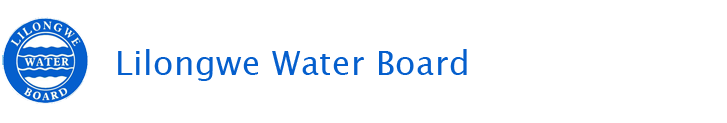
<style>
.page{position:relative;width:727px;height:123px;background:#ffffff}
.page>*{position:absolute;margin:0}
.t1{font:33.3px "LucidaGrande";letter-spacing:0.01em;color:#055fcd}
</style>
<div class="page">
<p class="t1" style="left:118px;top:49px;width:349px;height:32px">Lilongwe Water Board</p>
</div>
